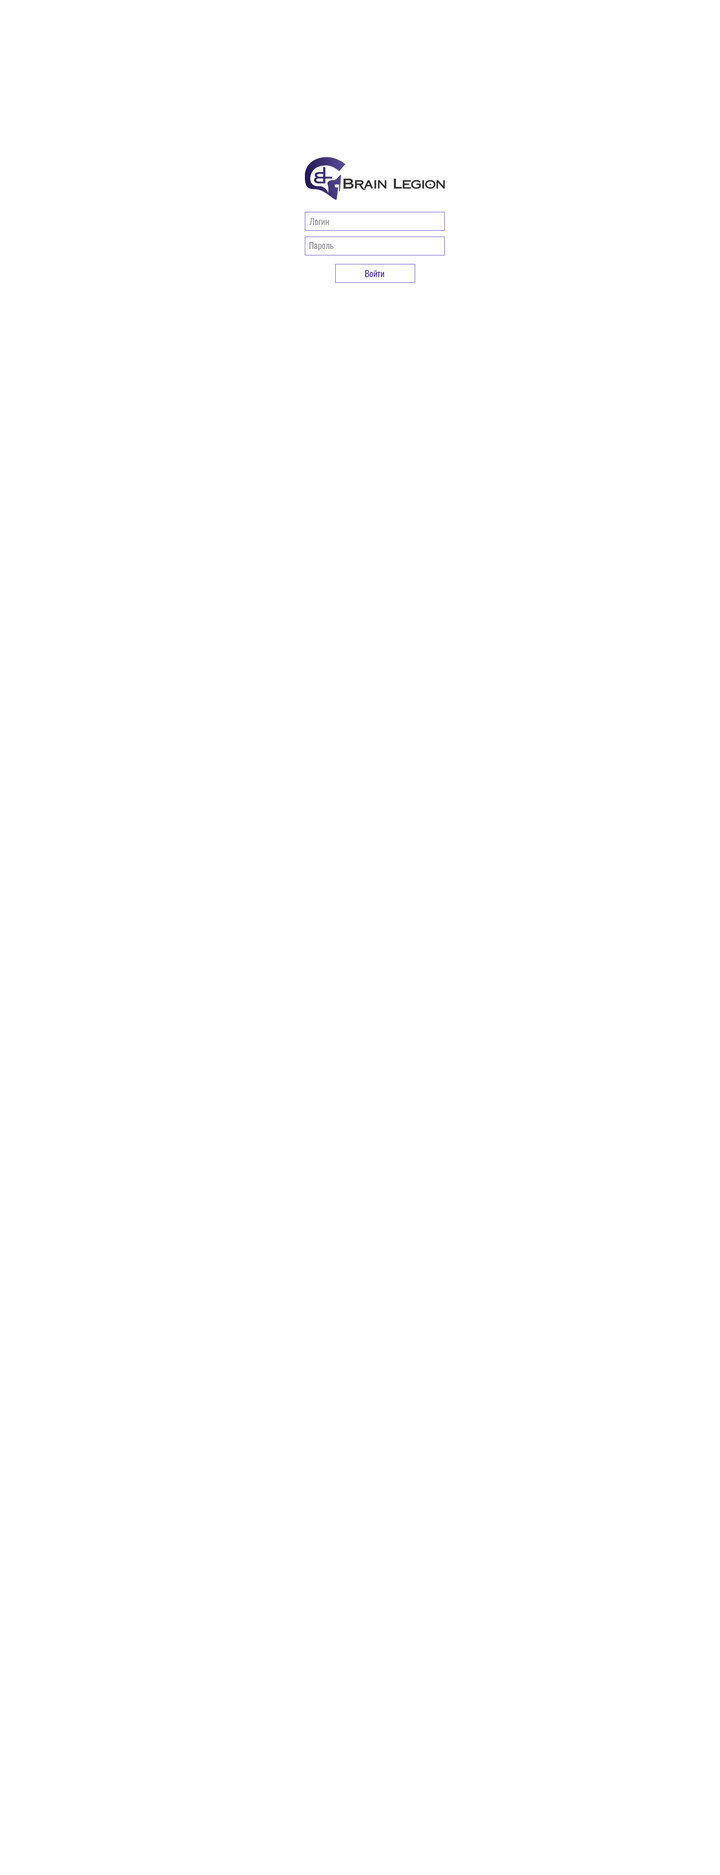
<style>
.page{position:relative;width:720px;height:1875px;background:#ffffff}
.page>*{position:absolute;margin:0}
.t1{font:9px "Oswald-Regular";color:#96959a}
.t2{font:9px "Oswald-Regular";color:#492da8}
</style>
<div class="page">
<p class="t1" style="left:309px;top:218px;width:20px;height:7px">Логин</p>
<p class="t1" style="left:309px;top:242px;width:24px;height:8px">Пароль</p>
<p class="t2" style="left:365px;top:270px;width:19px;height:7px">Войти</p>
</div>
